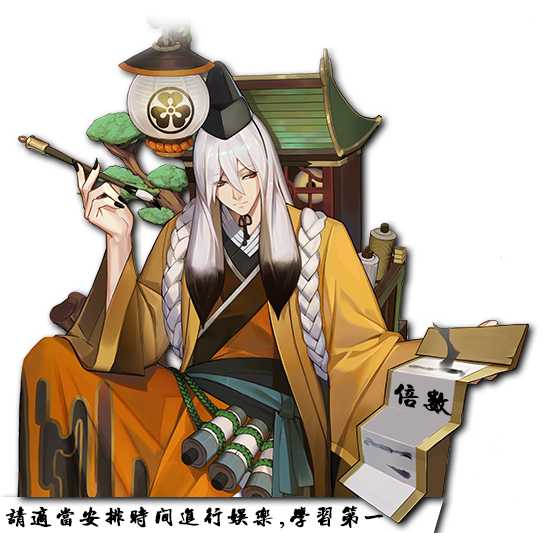
<style>
.page{position:relative;width:545px;height:533px;background:#ffffff}
.page>*{position:absolute;margin:0}
.t1{font:30px "SunYatsenHsingshu-";color:#030202;font-weight:bold;scale:1.03 1}
.t2{font:24px "SunYatsenHsingshu-";color:#000000;font-weight:bold}
</style>
<div class="page">
<p class="t1" style="left:394px;top:383px;width:58px;height:33px;rotate:14deg">倍数</p>
<p class="t2" style="left:6px;top:505px;width:378px;height:24px">请适当安排时间进行娱乐,学习第一</p>
</div>
